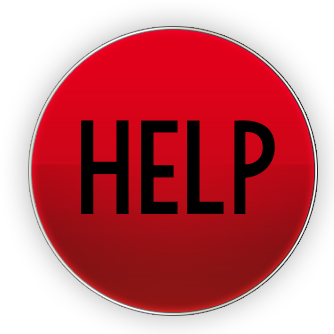
<style>
.page{position:relative;width:334px;height:334px}
.page>*{position:absolute;margin:0}
.t1{font:125.8px "KGWhYyOuGoTtABeSoMeAn";letter-spacing:0.025em;color:#000000}
</style>
<div class="page">
<p class="t1" style="left:81px;top:120px;width:194px;height:94px">HELP</p>
</div>
